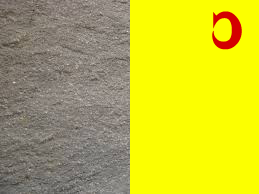
<style>
.page{position:relative;width:259px;height:194px;background:#fcff00}
.page>*{position:absolute;margin:0}
.t1{font:52.2px "LatinWide";color:#d40000;scale:0.46 1}
</style>
<div class="page">
<p class="t1" style="left:212px;top:11px;width:30px;height:39px;rotate:180deg">C</p>
</div>
